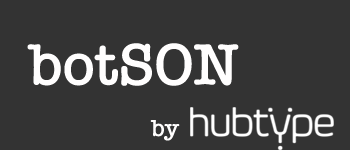
<style>
.page{position:relative;width:350px;height:150px;background:#333333}
.page>*{position:absolute;margin:0}
.t1{font:60px "AmericanTypewriter-Semibold";letter-spacing:-0.01em;color:#fffefe}
.t2{font:24px "AmericanTypewriter-Semibold";letter-spacing:-0.01em;color:#fffefe}
</style>
<div class="page">
<p class="t1" style="left:27px;top:43px;width:212px;height:43px">botSON</p>
<p class="t2" style="left:150px;top:120px;width:30px;height:21px">by</p>
</div>
